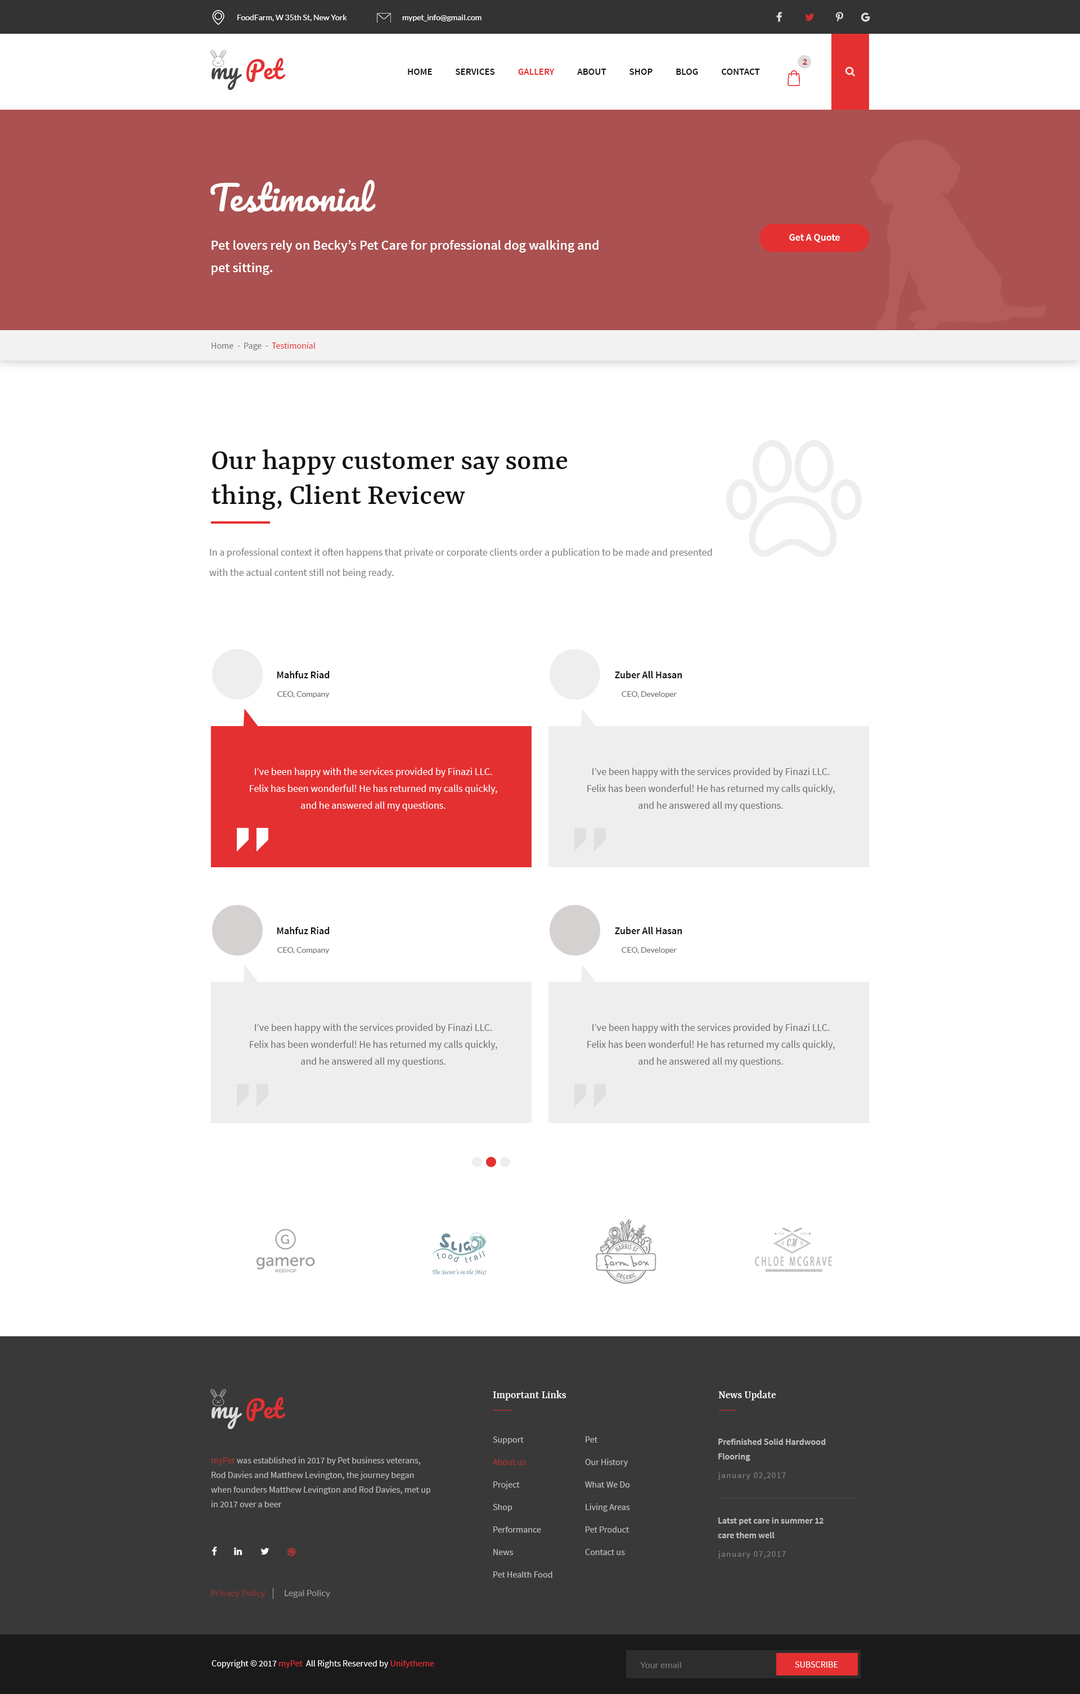
<style>
.page{position:relative;width:1080px;height:1694px;background:#ffffff}
.page>*{position:absolute;margin:0}
.t1{font:7.9px "Lato-Regular";color:#ffffff}
.t2{font:23.6px "Pacifico-Regular";color:#e53031}
.t3{font:23.6px "Pacifico-Regular";color:#454444}
.t4{font:9px "SourceSansPro-SemiBold";color:#d12526;text-transform:uppercase}
.t5{font:9.6px "SourceSansPro-SemiBold";color:#121212;text-transform:uppercase}
.t6{font:9.6px "SourceSansPro-SemiBold";color:#e53031;text-transform:uppercase}
.t7{font:33.8px "Pacifico-Regular";color:#ffffff}
.t8{font:13.5px/22.5px "SourceSansPro-SemiBold";color:#ffffff}
.t9{font:10.1px "SourceSansPro-SemiBold";color:#fffefe}
.t10{font:9px "SourceSansPro-Regular";color:#767575}
.t11{font:9px "SourceSansPro-Regular";color:#e53031}
.t12{font:30.4px/34.9px "Yrsa-Medium";color:#121212}
.t13{font:10.1px/20.2px "SourceSansPro-Regular";color:#797979}
.t14{font:10.1px "SourceSansPro-SemiBold";color:#121212}
.t15{font:7.9px "Lato-Regular";color:#737373}
.t16{font:10.1px/16.9px "SourceSansPro-Regular";color:#ffffff}
.t17{font:10.1px/16.9px "SourceSansPro-Regular";color:#6b6b6b}
.t18{font:23.6px "Pacifico-Regular";color:#dcdada}
.t19{font:11.2px "Yrsa-Medium";color:#ffffff}
.t20{font:9px/22.5px "SourceSansPro-Regular";color:#c0c0c0}
.t21{font:9px/14.6px "SourceSansPro-SemiBold";color:#c0c0c0}
.t22{font:9px/14.6px "SourceSansPro-Regular";color:#c0c0c0}
.t23{font:8.4px "SourceSansPro-Regular";letter-spacing:0.1em;color:#7d7d7d}
.t24{font:9px "Lato-Regular";color:#8e3536}
.t25{font:9px "Lato-Regular";color:#9c9b9b}
.t26{font:9px "SourceSansPro-Regular";color:#fefefe}
.t27{font:9px "SourceSansPro-Regular";color:#ffffff;text-transform:uppercase}
.t28{font:9px "Lato-Regular";color:#777777}
</style>
<div class="page">
<p class="t1" style="left:237px;top:15px;width:110px;height:6px">FoodFarm, W 35th St, New York</p>
<p class="t1" style="left:402px;top:15px;width:80px;height:6px">mypet_info@gmail.com</p>
<p class="t2" style="left:212px;top:58px;width:73px;height:32px"><span class="t3">my </span>Pet</p>
<p class="t4" style="left:803px;top:59px;width:4px;height:6px">2</p>
<p class="t5" style="left:408px;top:69px;width:352px;height:6px">Home            Services            <span class="t6">Gallery            </span>About            Shop            Blog            Contact</p>
<p class="t7" style="left:210px;top:180px;width:166px;height:33px">Testimonial</p>
<p class="t8" style="left:212px;top:240px;width:386px;height:35px">Pet lovers rely on Becky’s Pet Care for professional dog walking and pet sitting.</p>
<p class="t9" style="left:789px;top:234px;width:51px;height:8px">Get A Quote</p>
<p class="t10" style="left:212px;top:342px;width:104px;height:8px">Home  -  Page  - <span class="t11"> Testimonial</span></p>
<p class="t12" style="left:212px;top:449px;width:356px;height:61px">Our happy customer say some thing, Client Revicew</p>
<p class="t13" style="left:209px;top:548px;width:503px;height:30px">In a professional context it often happens that private or corporate clients order a publication to be made and presented with the actual content still not being ready.</p>
<p class="t14" style="left:277px;top:670px;width:53px;height:8px">Mahfuz Riad</p>
<p class="t14" style="left:615px;top:671px;width:67px;height:7px">Zuber All Hasan</p>
<p class="t15" style="left:277px;top:691px;width:53px;height:7px">CEO, Company</p>
<p class="t15" style="left:622px;top:691px;width:55px;height:7px">CEO, Developer</p>
<p class="t16" style="left:250px;top:768px;width:247px;height:43px;text-align:center">I’ve been happy with the services provided by Finazi LLC. Felix has been wonderful! He has returned my calls quickly, and he answered all my questions.</p>
<p class="t17" style="left:587px;top:768px;width:248px;height:43px;text-align:center">I’ve been happy with the services provided by Finazi LLC. Felix has been wonderful! He has returned my calls quickly, and he answered all my questions.</p>
<p class="t14" style="left:277px;top:926px;width:53px;height:8px">Mahfuz Riad</p>
<p class="t14" style="left:615px;top:927px;width:67px;height:7px">Zuber All Hasan</p>
<p class="t15" style="left:277px;top:947px;width:53px;height:7px">CEO, Company</p>
<p class="t15" style="left:622px;top:947px;width:55px;height:7px">CEO, Developer</p>
<p class="t17" style="left:250px;top:1024px;width:247px;height:43px;text-align:center">I’ve been happy with the services provided by Finazi LLC. Felix has been wonderful! He has returned my calls quickly, and he answered all my questions.</p>
<p class="t17" style="left:587px;top:1024px;width:248px;height:43px;text-align:center">I’ve been happy with the services provided by Finazi LLC. Felix has been wonderful! He has returned my calls quickly, and he answered all my questions.</p>
<p class="t2" style="left:212px;top:1397px;width:73px;height:32px"><span class="t18">my </span>Pet</p>
<p class="t19" style="left:493px;top:1390px;width:73px;height:11px">Important Links</p>
<p class="t19" style="left:718px;top:1390px;width:58px;height:11px">News Update</p>
<p class="t20" style="left:493px;top:1437px;width:59px;height:141px">Support<br>About us <br>Project<br>Shop<br>Performance<br>News<br>Pet Health Food</p>
<p class="t20" style="left:585px;top:1437px;width:45px;height:118px">Pet<br>Our History<br>What We Do<br>Living Areas<br>Pet Product<br>Contact us</p>
<p class="t21" style="left:718px;top:1439px;width:108px;height:22px">Prefinished Solid Hardwood <br>Flooring</p>
<p class="t22" style="left:211px;top:1457px;width:220px;height:51px">myPet was established in 2017 by Pet business veterans, Rod Davies and Matthew Levington, the journey began when founders Matthew Levington and Rod Davies, met up in 2017 over a beer</p>
<p class="t23" style="left:718px;top:1472px;width:68px;height:8px">january 02,2017</p>
<p class="t21" style="left:718px;top:1518px;width:106px;height:20px">Latst pet care in summer 12<br>care them well</p>
<p class="t23" style="left:718px;top:1551px;width:68px;height:8px">january 07,2017</p>
<p class="t24" style="left:211px;top:1590px;width:55px;height:8px">Privacy Policy</p>
<p class="t25" style="left:285px;top:1590px;width:45px;height:8px">Legal Policy</p>
<p class="t26" style="left:212px;top:1660px;width:222px;height:8px">Copyright © 2017 <span class="t11">myPet </span> All Rights Reserved by <span class="t11">Unifytheme</span></p>
<p class="t27" style="left:795px;top:1662px;width:43px;height:6px">Subscribe</p>
<p class="t28" style="left:640px;top:1662px;width:41px;height:6px">Your email</p>
</div>
